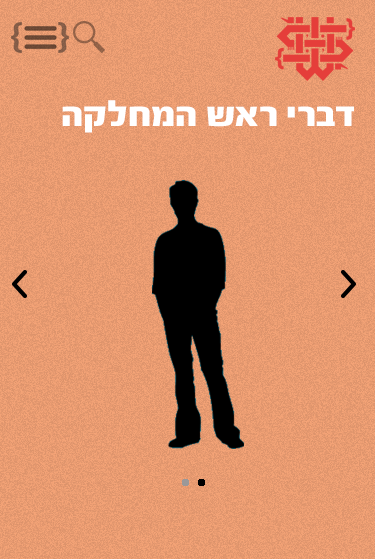
<style>
.page{position:relative;width:375px;height:559px}
.page>*{position:absolute;margin:0}
.t1{font:37.2px "FbScorpion-Black";color:#ffffff}
</style>
<div class="page">
<p class="t1" style="left:62px;top:100px;width:292px;height:33px">הקלחמה שאר ירבד</p>
</div>
